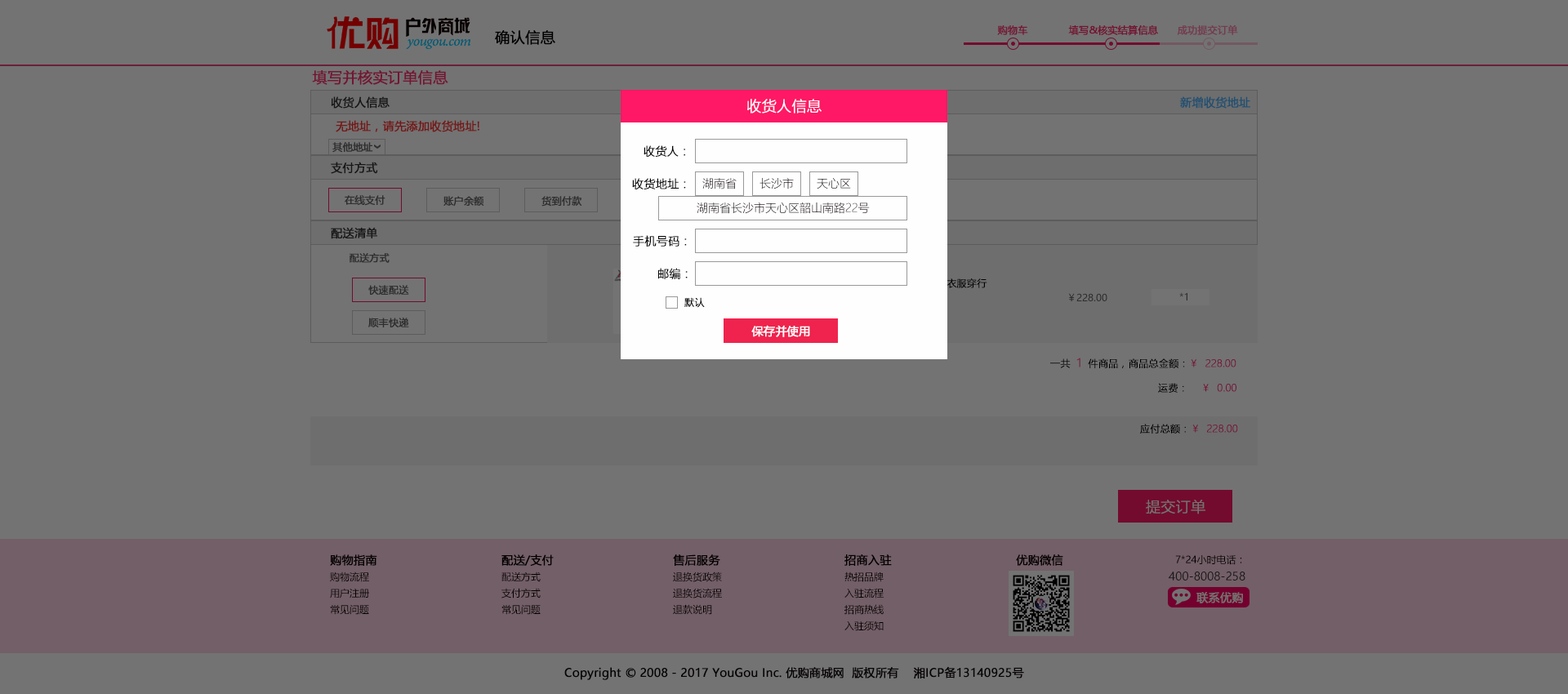
<style>
.page{position:relative;width:1568px;height:694px;background:#737373}
.page>*{position:absolute;margin:0}
.t1{font:9.8px "MicrosoftYaHei";color:#731837;font-weight:bold}
.t2{font:9.8px "MicrosoftYaHei";color:#731333;font-weight:bold}
.t3{font:9.8px "MicrosoftYaHei";color:#733c4e;font-weight:bold}
.t4{font:14.7px "MicrosoftYaHei";color:#010000;font-weight:bold}
.t5{font:14.7px "MicrosoftYaHei";color:#731534;font-weight:bold}
.t6{font:11.4px "MicrosoftYaHei";color:#171717;font-weight:bold}
.t7{font:14.7px "MicrosoftYaHeiLight";color:#fffeff;font-weight:bold}
.t8{font:11.4px "MicrosoftYaHei";color:#215071;font-weight:bold}
.t9{font:11.4px "MicrosoftYaHei";color:#731717;font-weight:bold}
.t10{font:9.8px "MicrosoftYaHei";color:#2e2e2e;font-weight:bold}
.t11{font:11.4px "MicrosoftYaHeiLight";color:#000000;font-weight:bold}
.t12{font:11.4px "MicrosoftYaHeiLight";color:#0e050a}
.t13{font:11.4px "MicrosoftYaHeiLight"}
.t14{font:9.8px "MicrosoftYaHei";color:#2e2e2e}
.t15{font:9.8px "MicrosoftYaHeiLight";color:#000000;font-weight:bold}
.t16{font:11.4px "MicrosoftYaHei";color:#ffffff;font-weight:bold}
.t17{font:11.4px "MicrosoftYaHeiLight";color:#ff4180;font-weight:bold}
.t18{font:9.8px "MicrosoftYaHeiLight";color:#ff217a;font-weight:bold}
.t19{font:9.8px "MicrosoftYaHeiLight";font-weight:bold}
.t20{font:14.7px "MicrosoftYaHeiLight";color:#737373;font-weight:bold}
.t21{font:11.4px "MicrosoftYaHei";color:#040000;font-weight:bold}
.t22{font:9.8px "MicrosoftYaHei";color:#040000}
.t23{font:11.4px "MicrosoftYaHei";color:#171717}
.t24{font:11.4px "MicrosoftYaHei";color:#737373;font-weight:bold}
.t25{font:11.4px "MicrosoftYaHei";color:#0e050a;font-weight:bold}
</style>
<div class="page">
<p class="t1" style="left:997px;top:25px;width:31px;height:10px">购物车</p>
<p class="t2" style="left:1068px;top:25px;width:90px;height:10px">填写&amp;核实结算信息</p>
<p class="t3" style="left:1177px;top:24px;width:61px;height:11px">成功提交订单</p>
<p class="t4" style="left:495px;top:30px;width:60px;height:15px">确认信息</p>
<p class="t5" style="left:312px;top:69px;width:136px;height:16px">填写并核实订单信息</p>
<p class="t6" style="left:331px;top:96px;width:59px;height:13px">收货人信息</p>
<p class="t7" style="left:747px;top:99px;width:75px;height:15px">收货人信息</p>
<p class="t8" style="left:1180px;top:96px;width:70px;height:13px">新增收货地址</p>
<p class="t9" style="left:336px;top:120px;width:143px;height:12px">无地址，请先添加收货地址!</p>
<p class="t10" style="left:332px;top:142px;width:41px;height:11px">其他地址</p>
<p class="t11" style="left:644px;top:145px;width:41px;height:12px">收货人：</p>
<p class="t6" style="left:331px;top:162px;width:47px;height:12px">支付方式</p>
<p class="t11" style="left:632px;top:178px;width:54px;height:11px">收货地址：</p>
<p class="t12" style="left:702px;top:178px;width:35px;height:11px">湖南省</p>
<p class="t13" style="left:760px;top:178px;width:34px;height:11px">长沙市</p>
<p class="t13" style="left:817px;top:178px;width:34px;height:11px">天心区</p>
<p class="t10" style="left:345px;top:195px;width:40px;height:11px">在线支付</p>
<p class="t10" style="left:443px;top:196px;width:41px;height:11px">账户余额</p>
<p class="t10" style="left:541px;top:196px;width:41px;height:11px">货到付款</p>
<p class="t12" style="left:697px;top:203px;width:173px;height:11px">湖南省长沙市天心区韶山南路22号</p>
<p class="t6" style="left:331px;top:227px;width:46px;height:12px">配送清单</p>
<p class="t11" style="left:633px;top:235px;width:54px;height:12px">手机号码：</p>
<p class="t10" style="left:350px;top:253px;width:40px;height:10px">配送方式</p>
<p class="t11" style="left:658px;top:268px;width:30px;height:11px">邮编：</p>
<p class="t10" style="left:368px;top:285px;width:41px;height:10px">快速配送</p>
<p class="t14" style="left:1068px;top:293px;width:39px;height:8px">￥228.00</p>
<p class="t14" style="left:1179px;top:292px;width:8px;height:9px">*1</p>
<p class="t15" style="left:684px;top:297px;width:21px;height:11px">默认</p>
<p class="t10" style="left:368px;top:318px;width:41px;height:9px">顺丰快递</p>
<p class="t16" style="left:751px;top:325px;width:59px;height:12px">保存并使用</p>
<p class="t15" style="left:1050px;top:358px;width:186px;height:10px">一共  <span class="t17">1 </span> 件商品，商品总金额：<span class="t18">￥  228.00</span></p>
<p class="t19" style="left:1158px;top:383px;width:78px;height:10px">运费：    ￥  0.00</p>
<p class="t18" style="left:1140px;top:424px;width:98px;height:10px"><span class="t15">应付总额：</span>￥  228.00</p>
<p class="t20" style="left:1146px;top:500px;width:59px;height:14px">提交订单</p>
<p class="t21" style="left:330px;top:555px;width:47px;height:11px">购物指南</p>
<p class="t21" style="left:501px;top:555px;width:53px;height:11px">配送/支付</p>
<p class="t21" style="left:673px;top:555px;width:47px;height:11px">售后服务</p>
<p class="t21" style="left:844px;top:555px;width:48px;height:11px">招商入驻</p>
<p class="t21" style="left:1016px;top:555px;width:47px;height:11px">优购微信</p>
<p class="t22" style="left:1175px;top:555px;width:67px;height:10px">7*24小时电话：</p>
<p class="t22" style="left:330px;top:572px;width:39px;height:10px">购物流程</p>
<p class="t22" style="left:501px;top:572px;width:40px;height:10px">配送方式</p>
<p class="t22" style="left:673px;top:572px;width:49px;height:10px">退换货政策</p>
<p class="t22" style="left:844px;top:572px;width:40px;height:10px">热招品牌</p>
<p class="t23" style="left:1169px;top:572px;width:76px;height:9px">400-8008-258</p>
<p class="t22" style="left:330px;top:588px;width:39px;height:11px">用户注册</p>
<p class="t22" style="left:501px;top:588px;width:40px;height:11px">支付方式</p>
<p class="t22" style="left:673px;top:588px;width:49px;height:11px">退换货流程</p>
<p class="t22" style="left:844px;top:588px;width:40px;height:11px">入驻流程</p>
<p class="t24" style="left:1196px;top:592px;width:47px;height:12px">联系优购</p>
<p class="t22" style="left:330px;top:604px;width:39px;height:11px">常见问题</p>
<p class="t22" style="left:501px;top:604px;width:40px;height:11px">常见问题</p>
<p class="t22" style="left:673px;top:604px;width:39px;height:11px">退款说明</p>
<p class="t22" style="left:844px;top:604px;width:40px;height:11px">招商热线</p>
<p class="t22" style="left:844px;top:621px;width:40px;height:10px">入驻须知</p>
<p class="t25" style="left:564px;top:666px;width:460px;height:14px">Copyright © 2008 - 2017 YouGou Inc. 优购商城网  版权所有    湘ICP备13140925号</p>
</div>
